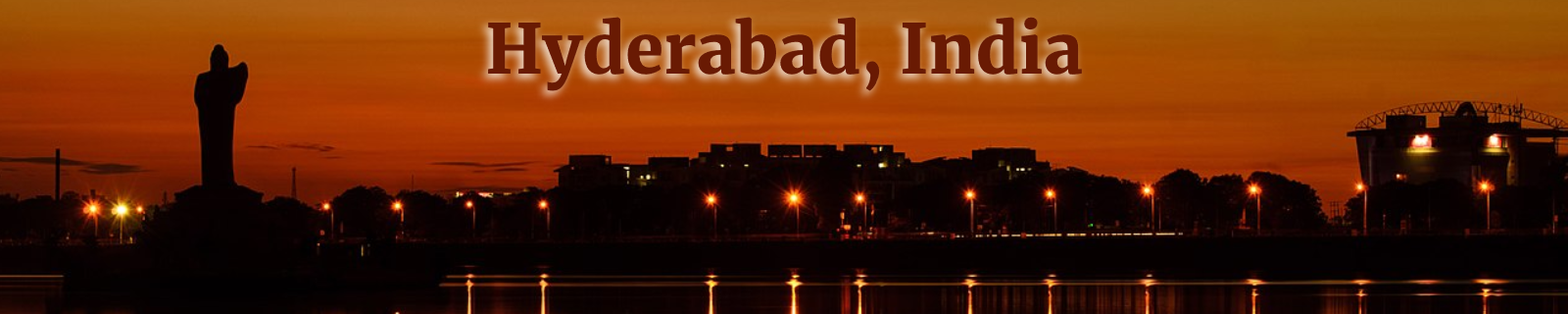
<style>
.page{position:relative;width:1568px;height:314px}
.page>*{position:absolute;margin:0}
.t1{font:68.6px "Merriweather-Black";color:#691a03}
</style>
<div class="page">
<p class="t1" style="left:488px;top:17px;width:594px;height:74px">Hyderabad, India</p>
</div>
